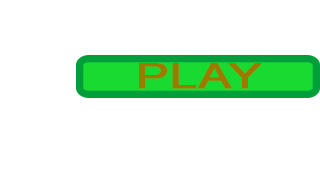
<style>
.page{position:relative;width:320px;height:179px;background:#ffffff}
.page>*{position:absolute;margin:0}
.t1{font:35px "ArialMT";color:#9f7800;font-weight:bold;scale:1.4 1}
</style>
<div class="page">
<p class="t1" style="left:139px;top:63px;width:123px;height:26px">PLAY</p>
</div>
